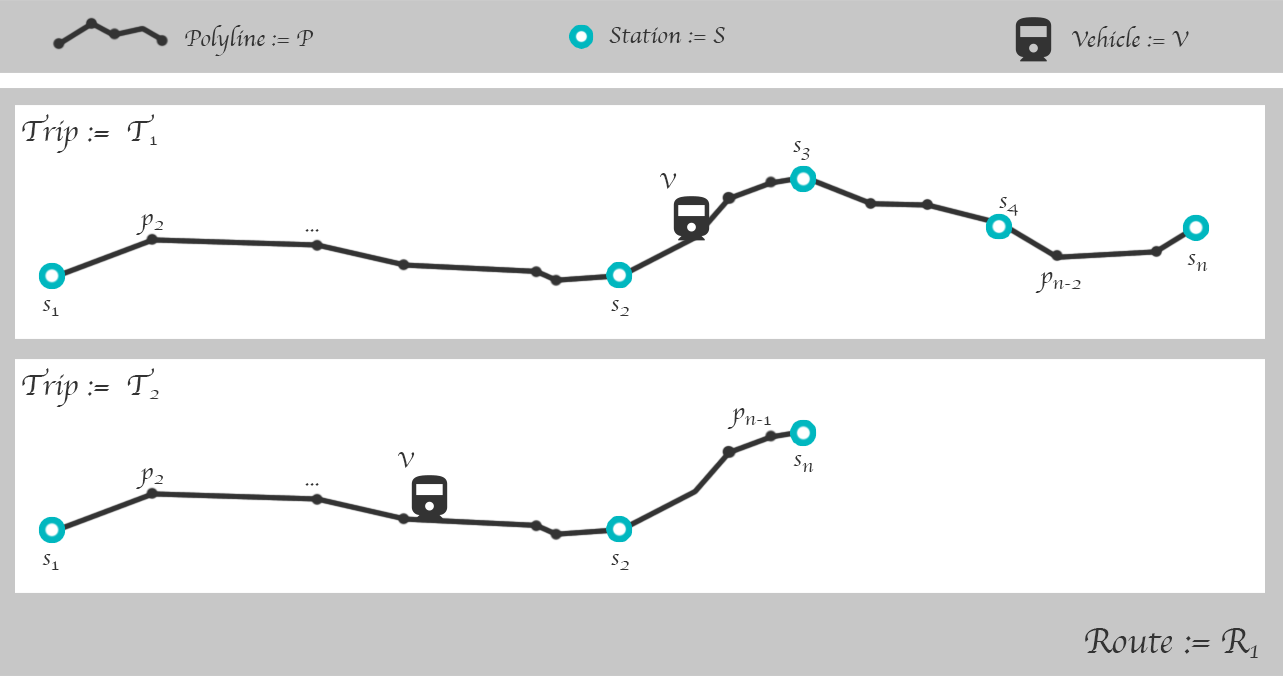
<style>
.page{position:relative;width:1283px;height:676px;background:#ffffff}
.page>*{position:absolute;margin:0}
.t1{font:24px "Apple-Chancery";color:#333333}
.t2{font:30px "Apple-Chancery";color:#333333}
.t3{font:20px "Apple-Chancery";color:#333333}
.t4{font:19.8px "Apple-Chancery";color:#333333}
.t5{font:36px "Apple-Chancery";color:#333333}
.t6{font:25px "Apple-Chancery";color:#333333}
</style>
<div class="page">
<p class="t1" style="left:185px;top:25px;width:129px;height:31px">Polyline := P</p>
<p class="t1" style="left:609px;top:27px;width:116px;height:17px">Station := S</p>
<p class="t1" style="left:1072px;top:26px;width:117px;height:21px">Vehicle := V</p>
<p class="t2" style="left:22px;top:114px;width:136px;height:39px">Trip :=  T<span class="t3">1</span></p>
<p class="t1" style="left:793px;top:141px;width:17px;height:19px">s<span class="t3">3</span></p>
<p class="t1" style="left:660px;top:173px;width:17px;height:16px">V</p>
<p class="t1" style="left:999px;top:197px;width:20px;height:19px">s<span class="t3">4</span></p>
<p class="t1" style="left:136px;top:214px;width:27px;height:21px">p<span class="t3">2</span></p>
<p class="t1" style="left:305px;top:229px;width:14px;height:3px">...</p>
<p class="t1" style="left:1187px;top:254px;width:21px;height:17px">s<span class="t3">n</span></p>
<p class="t4" style="left:1035px;top:272px;width:46px;height:21px"><span class="t1">p</span>n-2</p>
<p class="t1" style="left:42px;top:300px;width:17px;height:16px">s<span class="t3">1</span></p>
<p class="t1" style="left:611px;top:300px;width:18px;height:16px">s<span class="t3">2</span></p>
<p class="t2" style="left:22px;top:368px;width:137px;height:39px">Trip :=  T<span class="t3">2</span></p>
<p class="t4" style="left:727px;top:408px;width:45px;height:21px"><span class="t1">p</span>n-1</p>
<p class="t1" style="left:398px;top:452px;width:17px;height:16px">V</p>
<p class="t1" style="left:793px;top:455px;width:21px;height:17px">s<span class="t3">n</span></p>
<p class="t1" style="left:136px;top:468px;width:27px;height:21px">p<span class="t3">2</span></p>
<p class="t1" style="left:305px;top:483px;width:14px;height:3px">...</p>
<p class="t1" style="left:42px;top:554px;width:17px;height:16px">s<span class="t3">1</span></p>
<p class="t1" style="left:611px;top:554px;width:18px;height:16px">s<span class="t3">2</span></p>
<p class="t5" style="left:1085px;top:628px;width:173px;height:30px">Route := R<span class="t6">1</span></p>
</div>
